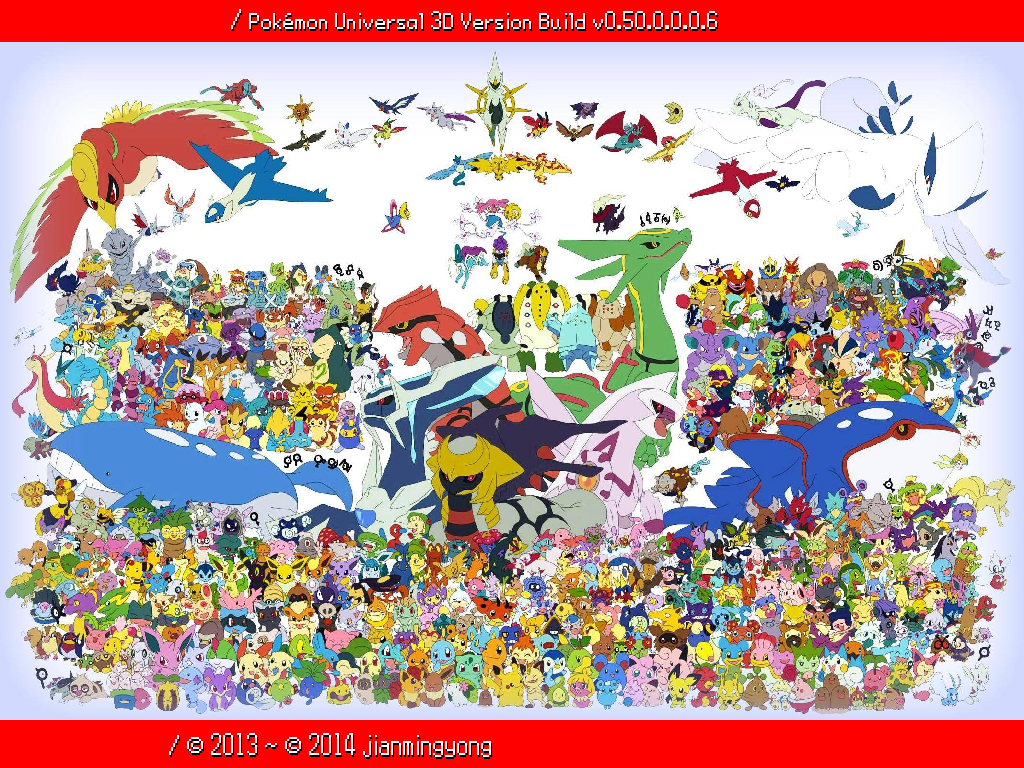
<style>
.page{position:relative;width:1024px;height:768px}
.page>*{position:absolute;margin:0}
.t1{font:24px "Power-Red-and-Green";color:#ffffff}
.t2{font:24px "Power-Red-and-Blue-Intl";color:#ffffff}
.t3{font:26px "Power-Red-and-Blue-Intl";color:#ffffff}
.t4{font:32px "Power-Red-and-Blue-Intl";color:#ffffff}
</style>
<div class="page">
<p class="t1" style="left:231px;top:9px;width:486px;height:20px"><span class="t2"> </span>/ Pokémon Universal 3D Version Build v0.50.0.0.0.6</p>
<p class="t3" style="left:169px;top:733px;width:322px;height:24px"><span class="t4"> </span>/ © 2013 ~ © 2014 jianmingyong</p>
</div>
